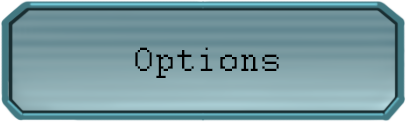
<style>
.page{position:relative;width:407px;height:122px}
.page>*{position:absolute;margin:0}
.t1{font:37.5px "Courier";color:#000000}
</style>
<div class="page">
<p class="t1" style="left:135px;top:47px;width:144px;height:31px">Options</p>
</div>
